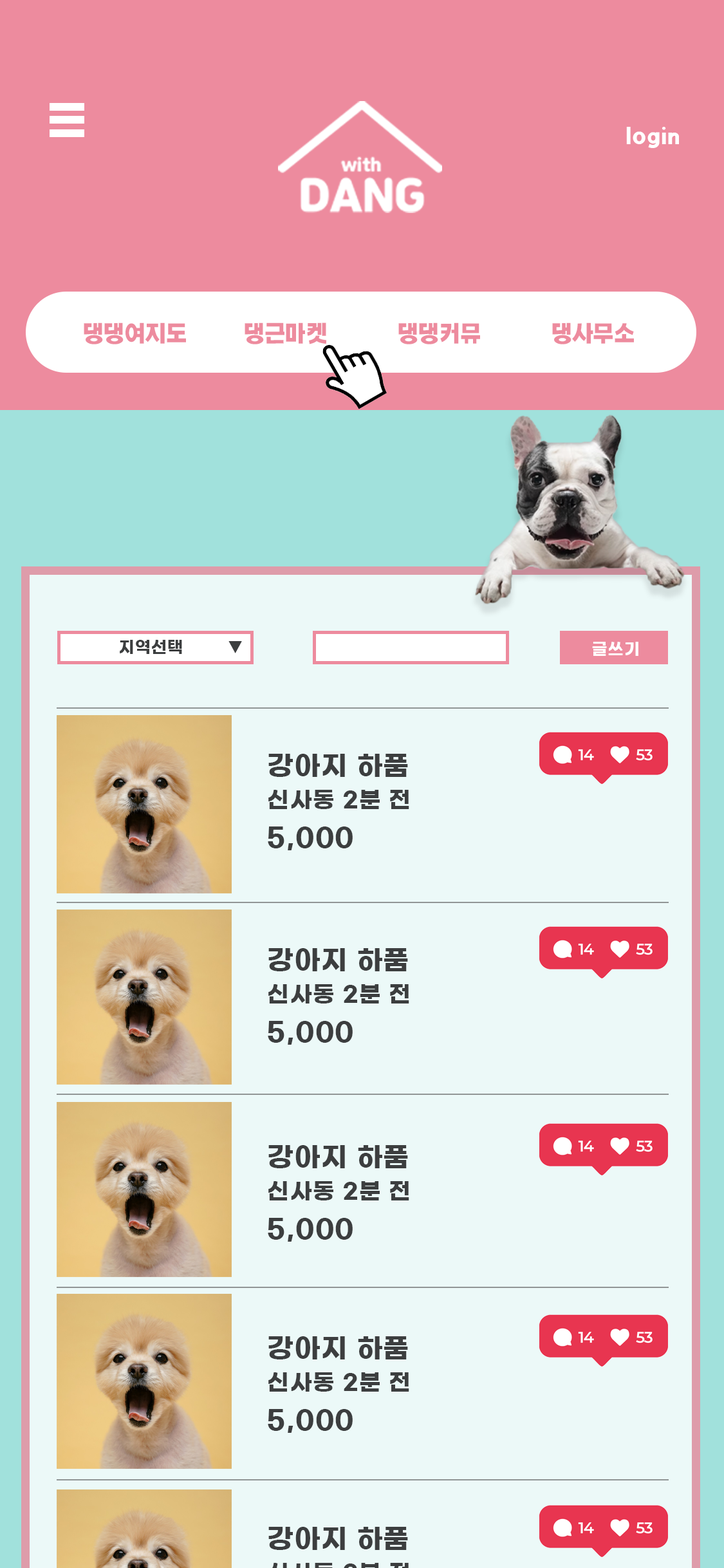
<style>
.page{position:relative;width:724px;height:1568px;background:#ecf9f8}
.page>*{position:absolute;margin:0}
.t1{font:21.2px "KOTRA_BOLD-Bold";color:#ffffff}
.t2{font:21.2px "KOTRA_BOLD-Bold";color:#ed8b9e}
.t3{font:16.2px "GmarketSansTTFBold";letter-spacing:0.04em;color:#3c3e3f}
.t4{font:16.2px "GmarketSansTTFBold";letter-spacing:0.04em;color:#ffffff}
.t5{font:22.7px/35.6px "GmarketSansTTFBold";letter-spacing:0.04em;color:#3c3e3f}
.t6{font:26.7px/35.6px "GmarketSansTTFBold";letter-spacing:0.04em;color:#3c3e3f}
</style>
<div class="page">
<p class="t1" style="left:626px;top:127px;width:53px;height:21px">login</p>
<p class="t2" style="left:84px;top:322px;width:102px;height:22px">댕댕여지도</p>
<p class="t2" style="left:245px;top:322px;width:82px;height:22px">댕근마켓</p>
<p class="t2" style="left:398px;top:322px;width:82px;height:22px">댕댕커뮤</p>
<p class="t2" style="left:552px;top:322px;width:82px;height:22px">댕사무소</p>
<p class="t3" style="left:120px;top:640px;width:122px;height:14px">지역선택       ▼</p>
<p class="t4" style="left:592px;top:642px;width:47px;height:14px">글쓰기</p>
<p class="t5" style="left:268px;top:754px;width:141px;height:96px"><span class="t6">강아지 하품<br></span>신사동 2분 전<br><span class="t6">5,000</span></p>
<p class="t5" style="left:268px;top:948px;width:141px;height:97px"><span class="t6">강아지 하품<br></span>신사동 2분 전<br><span class="t6">5,000</span></p>
<p class="t5" style="left:268px;top:1145px;width:141px;height:97px"><span class="t6">강아지 하품<br></span>신사동 2분 전<br><span class="t6">5,000</span></p>
<p class="t5" style="left:268px;top:1336px;width:141px;height:97px"><span class="t6">강아지 하품<br></span>신사동 2분 전<br><span class="t6">5,000</span></p>
</div>
